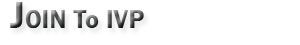
<style>
.page{position:relative;width:300px;height:45px;background:#ffffff}
.page>*{position:absolute;margin:0}
.t1{font:26px "FranklinGothic-Demi";letter-spacing:0.01em}
.t2{font:38px "FranklinGothic-Demi";letter-spacing:0.01em}
</style>
<div class="page">
<p class="t1" style="left:10px;top:2px;width:134px;height:27px"><span class="t2">J</span>OIN To IVP</p>
</div>
